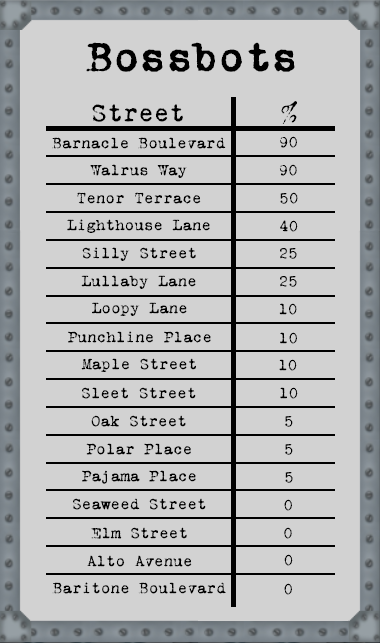
<style>
.page{position:relative;width:380px;height:643px;background:#d2d2d2}
.page>*{position:absolute;margin:0}
.t1{font:42px "VTPortableRemington";color:#000000;font-weight:bold}
.t2{font:26px "VTPortableRemington";color:#000000}
.t3{font:16px "VTPortableRemington";color:#000000}
</style>
<div class="page">
<p class="t1" style="left:86px;top:42px;width:209px;height:30px">Bossbots</p>
<p class="t2" style="left:281px;top:101px;width:16px;height:23px">%</p>
<p class="t2" style="left:92px;top:104px;width:91px;height:18px">Street</p>
<p class="t3" style="left:52px;top:137px;width:174px;height:12px">Barnacle Boulevard</p>
<p class="t3" style="left:280px;top:136px;width:17px;height:12px">90</p>
<p class="t3" style="left:90px;top:164px;width:97px;height:14px">Walrus Way</p>
<p class="t3" style="left:279px;top:164px;width:18px;height:12px">90</p>
<p class="t3" style="left:77px;top:192px;width:124px;height:12px">Tenor Terrace</p>
<p class="t3" style="left:280px;top:192px;width:18px;height:12px">50</p>
<p class="t3" style="left:67px;top:219px;width:143px;height:14px">Lighthouse Lane</p>
<p class="t3" style="left:280px;top:220px;width:18px;height:12px">40</p>
<p class="t3" style="left:82px;top:247px;width:114px;height:14px">Silly Street</p>
<p class="t3" style="left:280px;top:248px;width:17px;height:11px">25</p>
<p class="t3" style="left:81px;top:275px;width:115px;height:14px">Lullaby Lane</p>
<p class="t3" style="left:280px;top:276px;width:17px;height:11px">25</p>
<p class="t3" style="left:92px;top:302px;width:95px;height:14px">Loopy Lane</p>
<p class="t3" style="left:279px;top:303px;width:18px;height:12px">10</p>
<p class="t3" style="left:68px;top:331px;width:143px;height:12px">Punchline Place</p>
<p class="t3" style="left:280px;top:332px;width:17px;height:12px">10</p>
<p class="t3" style="left:81px;top:358px;width:115px;height:14px">Maple Street</p>
<p class="t3" style="left:279px;top:359px;width:18px;height:12px">10</p>
<p class="t3" style="left:82px;top:387px;width:114px;height:12px">Sleet Street</p>
<p class="t3" style="left:280px;top:387px;width:18px;height:12px">10</p>
<p class="t3" style="left:91px;top:415px;width:95px;height:12px">Oak Street</p>
<p class="t3" style="left:285px;top:416px;width:8px;height:11px">5</p>
<p class="t3" style="left:86px;top:443px;width:105px;height:12px">Polar Place</p>
<p class="t3" style="left:285px;top:444px;width:8px;height:11px">5</p>
<p class="t3" style="left:82px;top:470px;width:114px;height:14px">Pajama Place</p>
<p class="t3" style="left:285px;top:472px;width:8px;height:11px">5</p>
<p class="t3" style="left:73px;top:498px;width:133px;height:12px">Seaweed Street</p>
<p class="t3" style="left:284px;top:499px;width:8px;height:12px">0</p>
<p class="t3" style="left:91px;top:527px;width:96px;height:12px">Elm Street</p>
<p class="t3" style="left:284px;top:527px;width:8px;height:12px">0</p>
<p class="t3" style="left:87px;top:555px;width:105px;height:12px">Alto Avenue</p>
<p class="t3" style="left:284px;top:554px;width:9px;height:12px">0</p>
<p class="t3" style="left:52px;top:582px;width:174px;height:12px">Baritone Boulevard</p>
<p class="t3" style="left:284px;top:583px;width:8px;height:12px">0</p>
</div>
